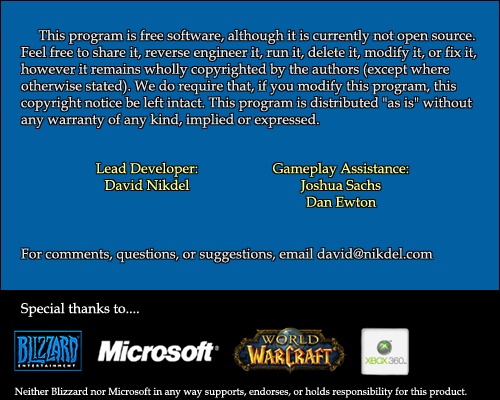
<style>
.page{position:relative;width:500px;height:400px;background:#025fa1}
.page>*{position:absolute;margin:0}
.t1{font:14px "BookAntiqua";color:#e6e6e6}
.t2{font:14px "BookAntiqua";color:#fffe83}
.t3{font:10px "BookAntiqua";color:#ffffff}
</style>
<div class="page">
<p class="t1" style="left:21px;top:29px;width:456px;height:234px">This program is free software, although it is currently not open source. <br>Feel free to share it, reverse engineer it, run it, delete it, modify it, or fix it,<br>however it remains wholly copyrighted by the authors (except where <br>otherwise stated). We do require that, if you modify this program, this <br>copyright notice be left intact. This program is distributed "as is" without <br>any warranty of any kind, implied or expressed.<br><br><br><br><br><br><br><br>For comments, questions, or suggestions, email david@nikdel.com</p>
<p class="t2" style="left:96px;top:162px;width:102px;height:29px;text-align:center">Lead Developer:<br>David Nikdel</p>
<p class="t2" style="left:272px;top:162px;width:137px;height:45px;text-align:center">Gameplay Assistance:<br>Joshua Sachs<br>Dan Ewton</p>
<p class="t3" style="left:14px;top:387px;width:453px;height:11px">Neither Blizzard nor Microsoft in any way supports, endorses, or holds responsibility for this product.</p>
</div>
